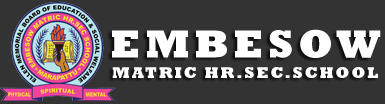
<style>
.page{position:relative;width:385px;height:104px;background:#333333}
.page>*{position:absolute;margin:0}
.t1{font:40px "Rockwell-ExtraBold";letter-spacing:0.12em;color:#ffffff}
.t2{font:16px "Rockwell-ExtraBold";letter-spacing:0.12em;color:#ffffff}
</style>
<div class="page">
<p class="t1" style="left:112px;top:29px;width:269px;height:29px">EMBESOW</p>
<p class="t2" style="left:112px;top:67px;width:266px;height:11px">MATRIC HR.SEC.SCHOOL</p>
</div>
